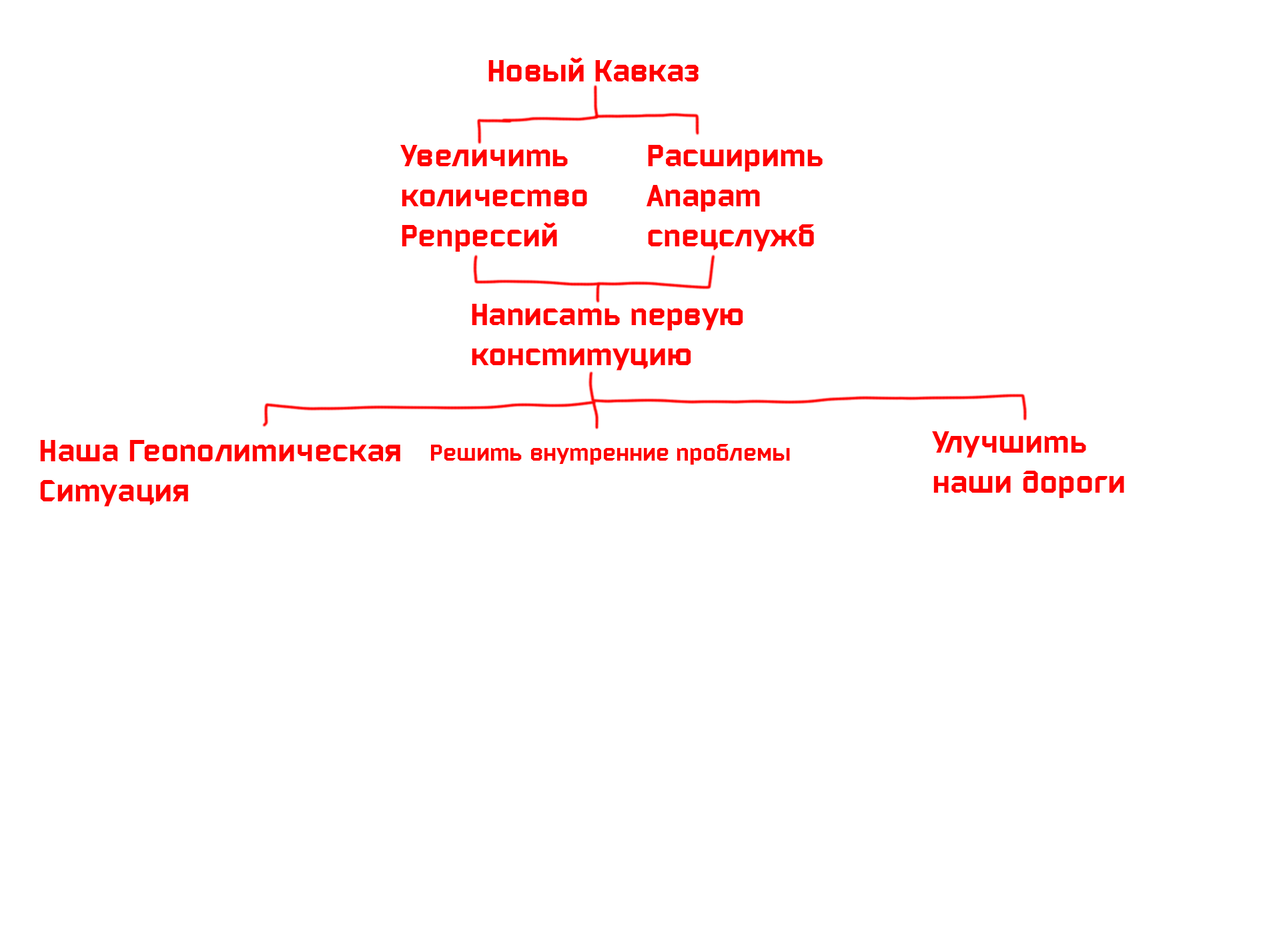
<style>
.page{position:relative;width:1261px;height:946px;background:#ffffff}
.page>*{position:absolute;margin:0}
.t1{font:33.4px "Bombardier";color:#ff0000;scale:1.09 1}
.t2{font:24.8px "Bombardier";color:#ff0000;scale:1.09 1}
</style>
<div class="page">
<p class="t1" style="left:400px;top:145px;width:187px;height:107px">Увеличить<br>количество<br>Репрессий</p>
<p class="t1" style="left:932px;top:431px;width:192px;height:67px">Улучшить<br>наши дороги</p>
<p class="t1" style="left:40px;top:440px;width:360px;height:66px">Наша Геополитическая<br>Ситуация</p>
<p class="t2" style="left:431px;top:444px;width:359px;height:20px">Решить внутренние проблемы</p>
</div>
